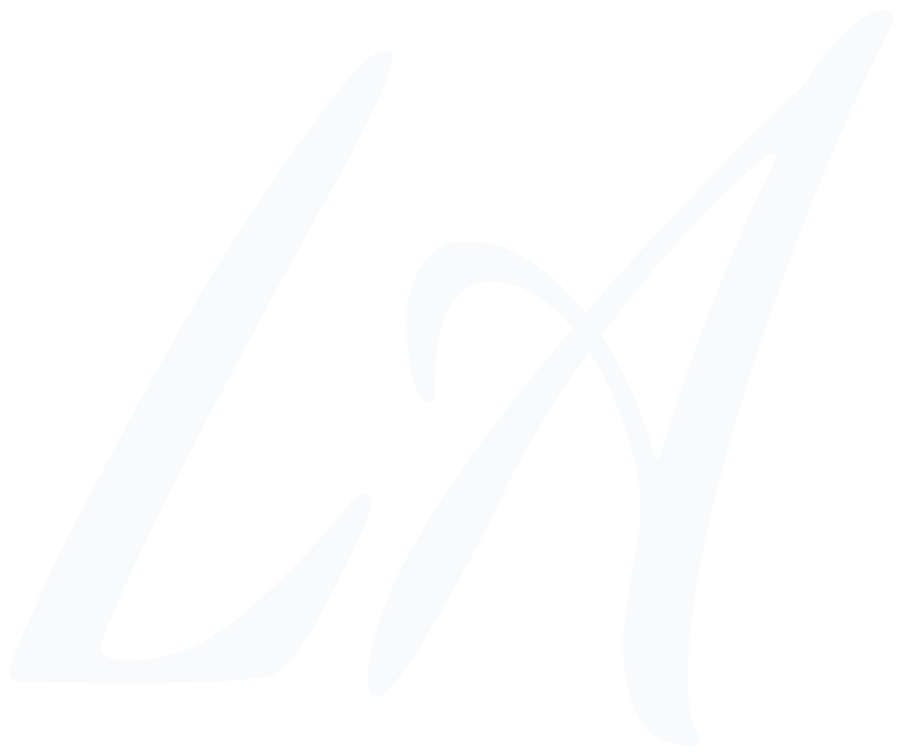
<style>
.page{position:relative;width:905px;height:753px;background:#ffffff}
.page>*{position:absolute;margin:0}
.t1{font:800px "AguafinaScript-Regular";color:#f9fafc}
</style>
<div class="page">
<p class="t1" style="left:9px;top:10px;width:885px;height:736px">LA</p>
</div>
